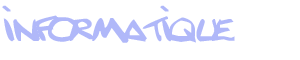
<style>
.page{position:relative;width:300px;height:60px;background:#ffffff}
.page>*{position:absolute;margin:0}
.t1{font:60px "Texted'critureLanfeust";color:#b0b8f9}
</style>
<div class="page">
<p class="t1" style="left:2px;top:5px;width:233px;height:38px">informatique</p>
</div>
